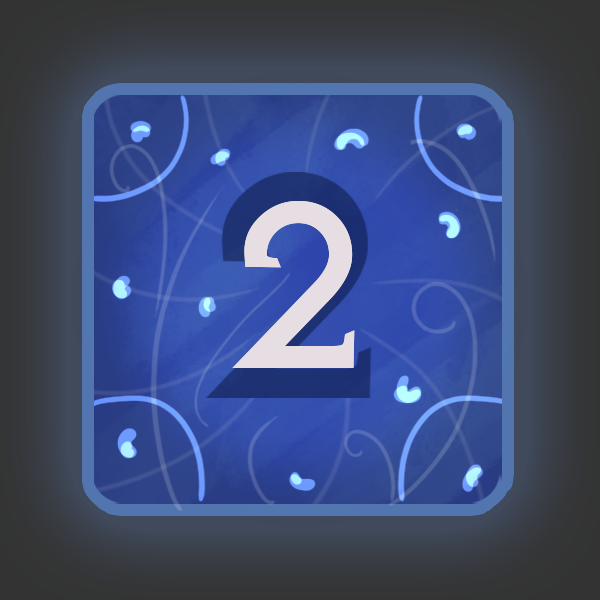
<style>
.page{position:relative;width:600px;height:600px}
.page>*{position:absolute;margin:0}
.t1{font:270px "AvQest";color:#e7dee3}
</style>
<div class="page">
<p class="t1" style="left:232px;top:201px;width:123px;height:167px">2</p>
</div>
